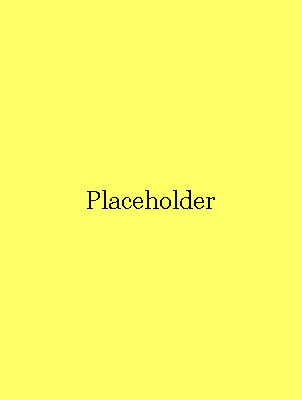
<style>
.page{position:relative;width:302px;height:400px;background:#ffff66}
.page>*{position:absolute;margin:0}
.t1{font:25px "Georgia";color:#050505}
</style>
<div class="page">
<p class="t1" style="left:87px;top:190px;width:128px;height:19px">Placeholder</p>
</div>
